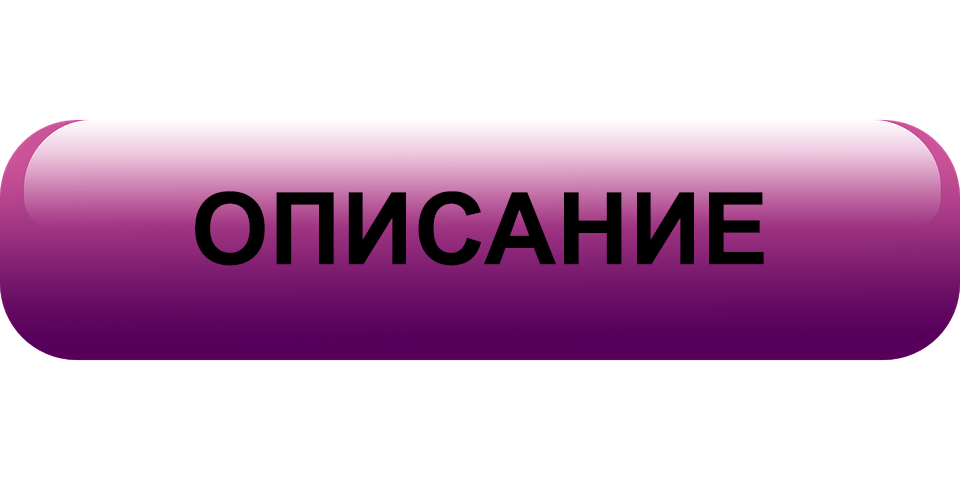
<style>
.page{position:relative;width:960px;height:480px;background:#ffffff}
.page>*{position:absolute;margin:0}
.t1{font:100px "Arial-BoldMT";letter-spacing:0.005em;color:#000000;text-transform:uppercase}
</style>
<div class="page">
<p class="t1" style="left:195px;top:191px;width:569px;height:75px">ОПИСАНИЕ</p>
</div>
